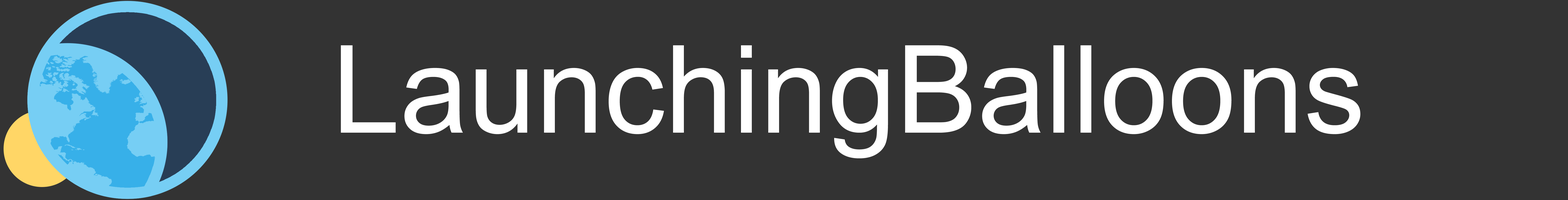
<style>
.page{position:relative;width:1568px;height:200px;background:#333333}
.page>*{position:absolute;margin:0}
.t1{font:122.1px "ArialMT";color:#ffffff}
</style>
<div class="page">
<p class="t1" style="left:341px;top:45px;width:1019px;height:114px">LaunchingBalloons</p>
</div>
